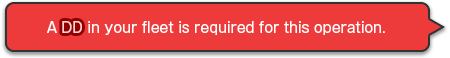
<style>
.page{position:relative;width:450px;height:58px;background:#ed3b3b}
.page>*{position:absolute;margin:0}
.t1{font:14px "GothicMB101Pro-Regular";color:#ffffff}
.t2{font:14px "GothicMB101Pro-Regular";color:#ffd3d3}
</style>
<div class="page">
<p class="t1" style="left:47px;top:21px;width:338px;height:14px">A <span class="t2">DD</span> in your fleet is required for this operation.</p>
<p class="t1" style="left:47px;top:21px;width:338px;height:14px">A <span class="t2">DD</span> in your fleet is required for this operation.</p>
</div>
